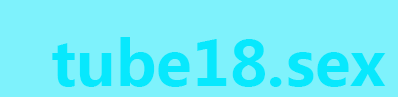
<style>
.page{position:relative;width:398px;height:97px;background:#7ef2fc}
.page>*{position:absolute;margin:0}
.t1{font:61px "MicrosoftYaHei-Bold";color:#07e8fd}
</style>
<div class="page">
<p class="t1" style="left:52px;top:37px;width:334px;height:50px">tube18.sex</p>
</div>
